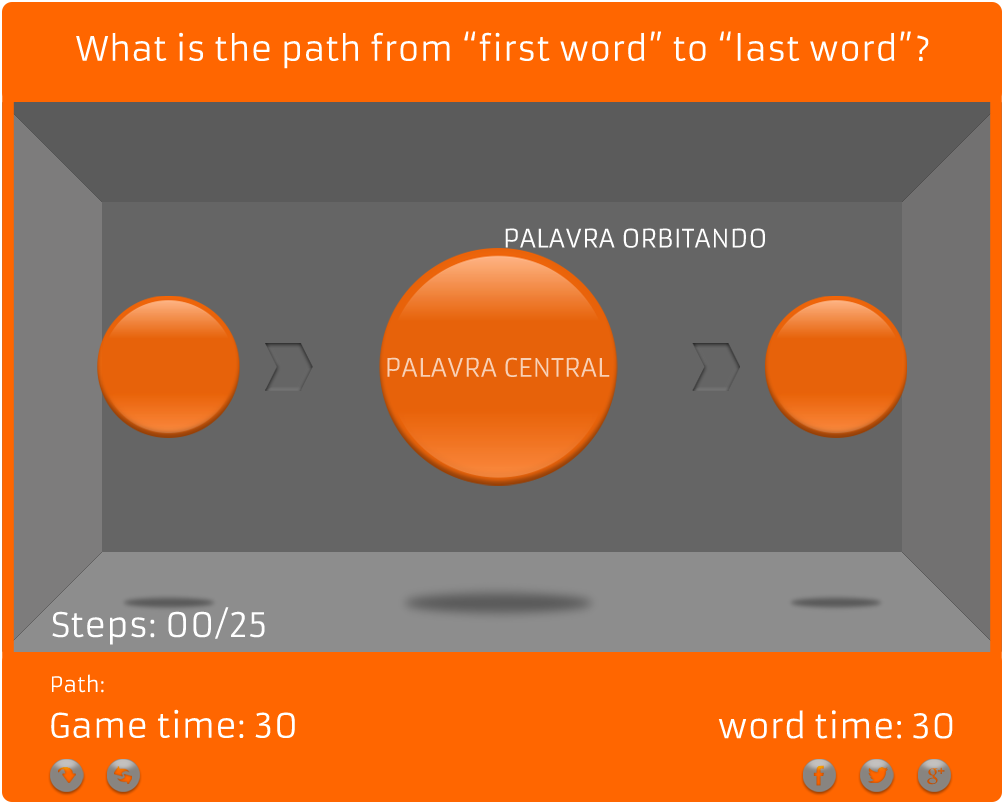
<style>
.page{position:relative;width:1004px;height:804px;background:#ff6600}
.page>*{position:absolute;margin:0}
.t1{font:33.3px "Armata-Regular";color:#ffffff}
.t2{font:25px "Armata-Regular";color:#ffffff}
.t3{font:25px "Armata-Regular";color:#f8d0b6}
.t4{font:20.8px "Armata-Regular";color:#ffffff}
</style>
<div class="page">
<p class="t1" style="left:76px;top:31px;width:853px;height:38px">What is the path from “first word” to “last word”?</p>
<p class="t2" style="left:505px;top:228px;width:260px;height:20px">PALAVRA ORBITANDO</p>
<p class="t3" style="left:387px;top:357px;width:223px;height:20px">PALAVRA CENTRAL</p>
<p class="t1" style="left:52px;top:607px;width:213px;height:38px">Steps: 00/25</p>
<p class="t4" style="left:52px;top:674px;width:52px;height:19px">Path:</p>
<p class="t1" style="left:51px;top:709px;width:244px;height:29px">Game time: 30</p>
<p class="t1" style="left:718px;top:710px;width:235px;height:29px">word time: 30</p>
</div>
